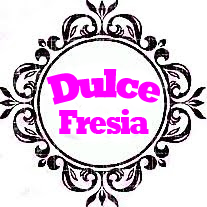
<style>
.page{position:relative;width:207px;height:207px;background:#ffffff}
.page>*{position:absolute;margin:0}
.t1{font:40.8px "Rockwell-ExtraBold";letter-spacing:-0.075em;color:#ff00ff;scale:0.76 1}
.t2{font:14.7px "LucidaHandwriting-Italic";color:#101010;scale:1.07 1}
.t3{font:35.7px "Rockwell-ExtraBold";letter-spacing:-0.075em;color:#ff00ff;scale:0.76 1}
</style>
<div class="page">
<p class="t1" style="left:46px;top:69px;width:114px;height:36px"><span class="t2"><br><br></span>Dulce</p>
<p class="t3" style="left:59px;top:109px;width:90px;height:25px">Fresia</p>
</div>
